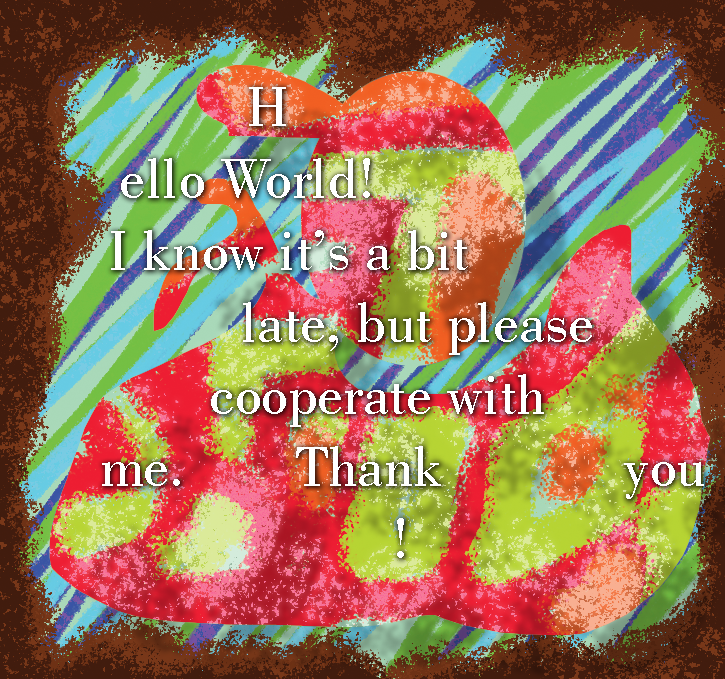
<style>
.page{position:relative;width:725px;height:679px}
.page>*{position:absolute;margin:0}
.t1{font:60px "BodoniBT-Book";color:#ffffff}
</style>
<div class="page">
<p class="t1" style="left:102px;top:87px;width:602px;height:471px">Hello World! I know it’s a bit late, but please cooperate with me. Thank you!</p>
</div>
